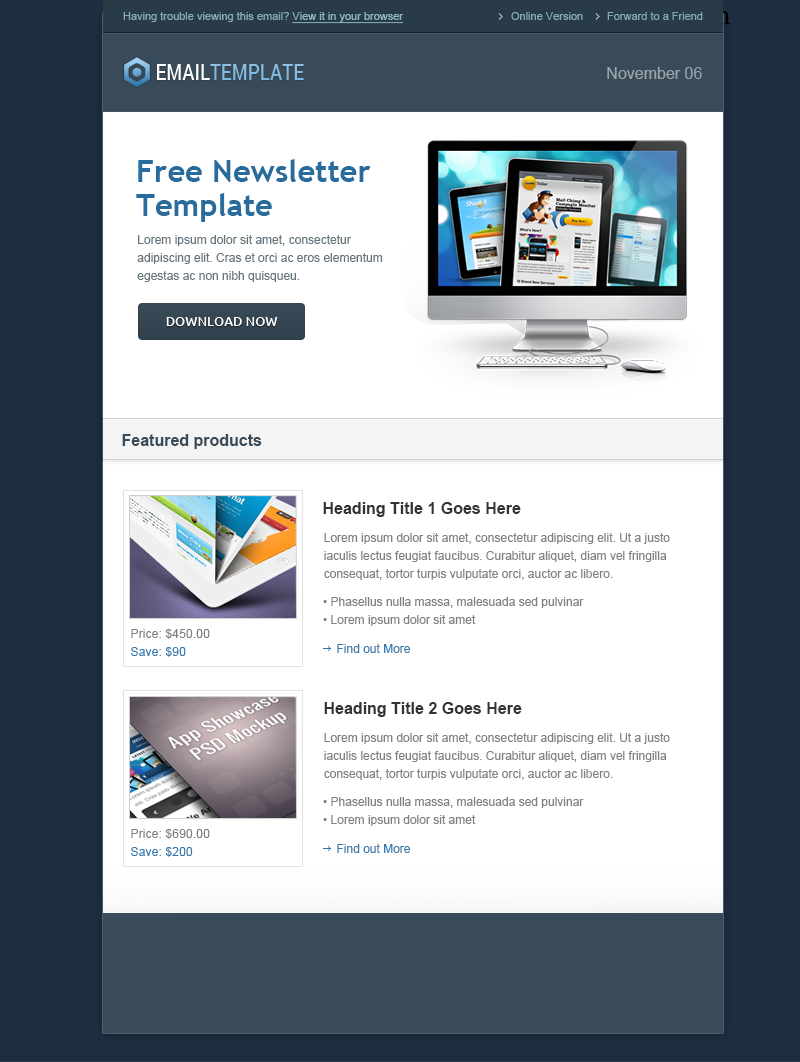
<style>
.page{position:relative;width:800px;height:1062px;background:#ffffff}
.page>*{position:absolute;margin:0}
.t1{font:11px "ArialMT";color:#85acb3}
.t2{font:11px "ArialMT";color:#8fb9c0;text-decoration:underline}
.t3{font:11px "Vani";color:#888888}
.t4{font:22px "RobotoCondensed-Regular";color:#ffffff;text-transform:uppercase}
.t5{font:22px "RobotoCondensed-Regular";color:#84bbe1;text-transform:uppercase}
.t6{font:16px "ArialMT";color:#9ca5ac}
.t7{font:30.9px/34px "TrebuchetMS-Bold";color:#286c9e}
.t8{font:12px/18px "ArialMT";color:#66747d}
.t9{font:13px "Ubuntu-Medium";color:#ffffff;text-transform:uppercase}
.t10{font:16px "Arial-BoldMT";color:#394b58}
.t11{font:16px "Arial-BoldMT";color:#333333}
.t12{font:12px/18px "ArialMT";color:#808080}
.t13{font:12px/18px "ArialMT";color:#3479ab}
.t14{font:12px "ArialMT";color:#3479ab}
</style>
<div class="page">
<p class="t1" style="left:123px;top:12px;width:281px;height:12px">Having trouble viewing this email? <span class="t2">View it in your browser</span></p>
<p class="t1" style="left:511px;top:12px;width:72px;height:8px">Online Version</p>
<p class="t1" style="left:607px;top:12px;width:96px;height:8px"><span class="t3"> </span>Forward to a Friend</p>
<p class="t4" style="left:157px;top:64px;width:53px;height:16px">Email</p>
<p class="t5" style="left:210px;top:64px;width:94px;height:16px">Template</p>
<p class="t6" style="left:607px;top:67px;width:95px;height:12px">November 06</p>
<p class="t7" style="left:136px;top:159px;width:235px;height:63px">Free Newsletter<br>Template</p>
<p class="t8" style="left:137px;top:235px;width:246px;height:47px">Lorem ipsum dolor sit amet, consectetur adipiscing elit. Cras et orci ac eros elementum egestas ac non nibh quisqueu.</p>
<p class="t9" style="left:166px;top:317px;width:112px;height:9px">download now</p>
<p class="t10" style="left:122px;top:434px;width:140px;height:15px">Featured products</p>
<p class="t11" style="left:323px;top:502px;width:198px;height:15px">Heading Title 1 Goes Here</p>
<p class="t12" style="left:324px;top:533px;width:346px;height:47px">Lorem ipsum dolor sit amet, consectetur adipiscing elit. Ut a justo iaculis lectus feugiat faucibus. Curabitur aliquet, diam vel fringilla consequat, tortor turpis vulputate orci, auctor ac libero.</p>
<p class="t12" style="left:323px;top:597px;width:261px;height:29px">• Phasellus nulla massa, malesuada sed pulvinar<br>• Lorem ipsum dolor sit amet</p>
<p class="t12" style="left:131px;top:629px;width:79px;height:28px">Price: $450.00<br><span class="t13">Save: $90</span></p>
<p class="t14" style="left:337px;top:644px;width:73px;height:9px">Find out More</p>
<p class="t11" style="left:324px;top:702px;width:198px;height:15px">Heading Title 2 Goes Here</p>
<p class="t12" style="left:324px;top:733px;width:346px;height:47px">Lorem ipsum dolor sit amet, consectetur adipiscing elit. Ut a justo iaculis lectus feugiat faucibus. Curabitur aliquet, diam vel fringilla consequat, tortor turpis vulputate orci, auctor ac libero.</p>
<p class="t12" style="left:323px;top:797px;width:261px;height:29px">• Phasellus nulla massa, malesuada sed pulvinar<br>• Lorem ipsum dolor sit amet</p>
<p class="t12" style="left:131px;top:829px;width:79px;height:28px">Price: $690.00<br><span class="t13">Save: $200</span></p>
<p class="t14" style="left:337px;top:844px;width:73px;height:9px">Find out More</p>
</div>
